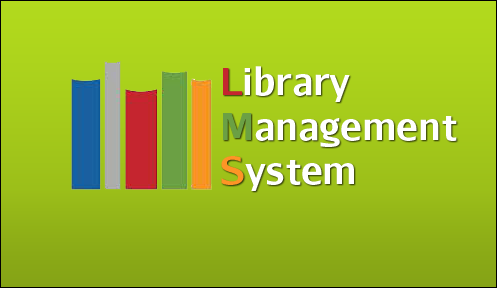
<style>
.page{position:relative;width:497px;height:288px}
.page>*{position:absolute;margin:0}
.t1{font:37.2px "AurulentSans-Bold";letter-spacing:-0.01em;color:#ffffff}
.t2{font:37.2px "AurulentSans-Bold";letter-spacing:-0.01em;color:#c5252f}
.t3{font:37.2px "AurulentSans-Bold";letter-spacing:-0.01em;color:#6ba044}
.t4{font:37.2px "AurulentSans-Bold";letter-spacing:-0.01em;color:#fd9526}
</style>
<div class="page">
<p class="t1" style="left:221px;top:66px;width:236px;height:125px"><span class="t2">L</span>ibrary <br><span class="t3">M</span>anagement<br><span class="t4">S</span>ystem</p>
</div>
